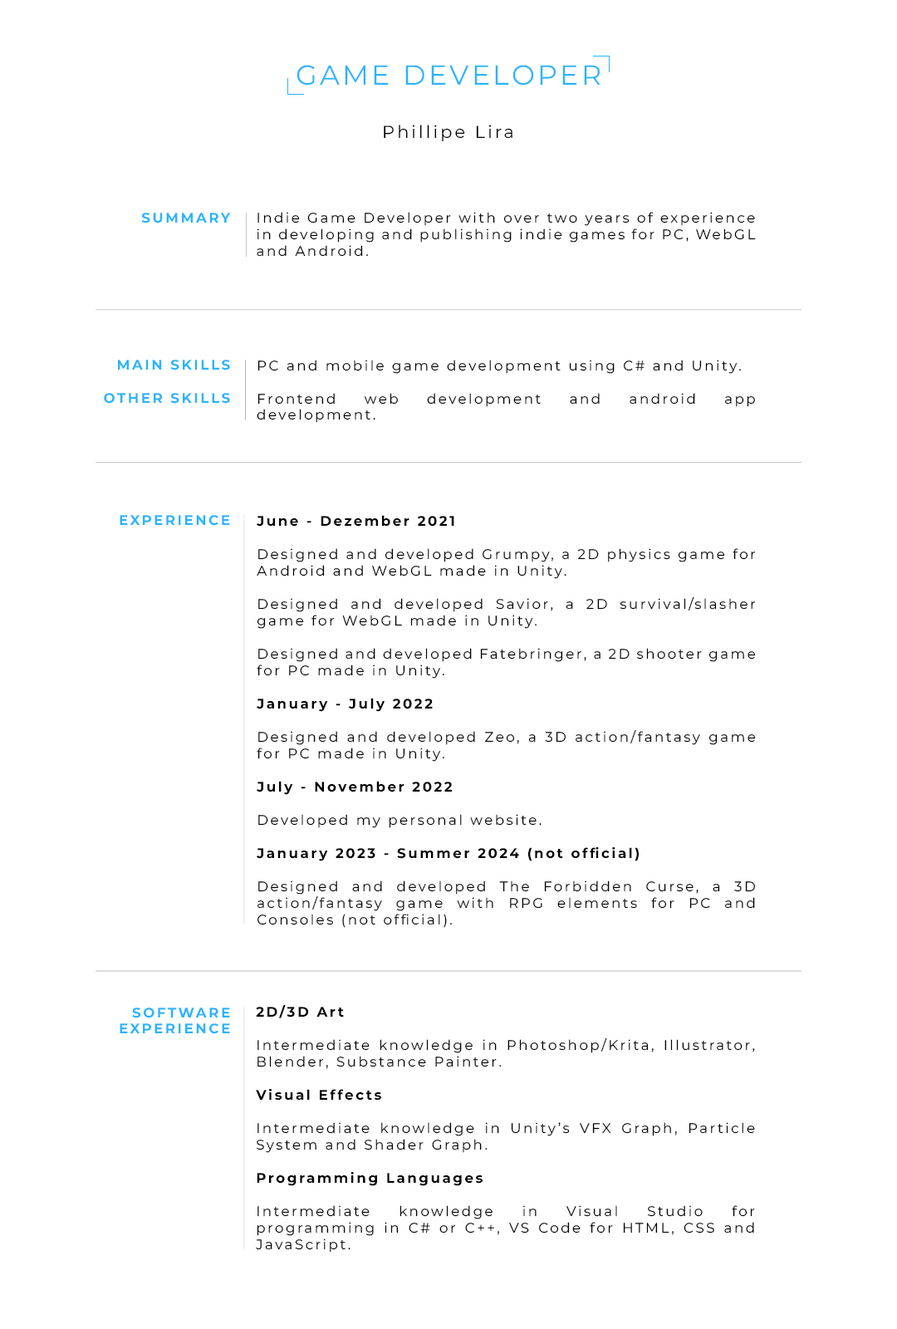
<style>
.page{position:relative;width:897px;height:1329px;background:#ffffff}
.page>*{position:absolute;margin:0}
.t1{font:27.7px "Montserrat-Regular";letter-spacing:0.1em;color:#2ab4ff}
.t2{font:17.3px "Montserrat-Regular";letter-spacing:0.15em;color:#000000}
.t3{font:13.8px "Montserrat-Bold";letter-spacing:0.15em;color:#2ab4ff}
.t4{font:13.8px "Montserrat-Regular";letter-spacing:0.15em;color:#000000}
.t5{font:13.8px "Montserrat-Bold";letter-spacing:0.15em;color:#000000}
</style>
<div class="page">
<p class="t1" style="left:297px;top:65px;width:304px;height:21px">GAME DEVELOPER</p>
<p class="t2" style="left:384px;top:125px;width:129px;height:16px">Phillipe Lira</p>
<p class="t3" style="left:141px;top:213px;width:90px;height:10px">SUMMARY</p>
<p class="t4" style="left:257px;top:212px;width:499px;height:45px;text-align:justify">Indie Game Developer with over two years of experience in developing and publishing indie games for PC, WebGL and Android.</p>
<p class="t3" style="left:104px;top:360px;width:126px;height:44px;text-align:right">MAIN SKILLS<br><br>OTHER SKILLS</p>
<p class="t4" style="left:257px;top:360px;width:498px;height:63px;text-align:justify">PC and mobile game development using C# and Unity.<br><br>Frontend web development and android app development.</p>
<p class="t3" style="left:120px;top:515px;width:110px;height:11px">EXPERIENCE</p>
<p class="t4" style="left:257px;top:515px;width:499px;height:413px;text-align:justify"><span class="t5">June - Dezember 2021<br></span><br>Designed and developed Grumpy, a 2D physics game for Android and WebGL made in Unity.<br><br>Designed and developed Savior, a 2D survival/slasher game for WebGL made in Unity.<br><br>Designed and developed Fatebringer, a 2D shooter game  for PC made in Unity.<br><br><span class="t5">January - July 2022<br></span><br>Designed and developed Zeo, a 3D action/fantasy game  for PC made in Unity.<br><br><span class="t5">July - November 2022<br></span><br>Developed my personal website.<br><br><span class="t5">January 2023 - Summer 2024 (not official)<br></span><br>Designed and developed The Forbidden Curse, a 3D action/fantasy game with RPG elements for PC and Consoles (not official).</p>
<p class="t3" style="left:120px;top:1008px;width:110px;height:26px;text-align:right">SOFTWARE<br>EXPERIENCE</p>
<p class="t4" style="left:256px;top:1005px;width:499px;height:248px;text-align:justify"><span class="t5">2D/3D Art<br></span><br>Intermediate knowledge in Photoshop/Krita, Illustrator, Blender, Substance Painter.<br><br><span class="t5">Visual Effects<br></span><br>Intermediate knowledge in Unity’s VFX Graph, Particle System and Shader Graph.<br><br><span class="t5">Programming Languages<br></span><br>Intermediate knowledge in Visual Studio for programming in C# or C++, VS Code for HTML, CSS and JavaScript.</p>
</div>
